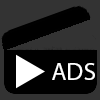
<style>
.page{position:relative;width:100px;height:100px;background:#000000}
.page>*{position:absolute;margin:0}
.t1{font:25px "MyriadPro-Regular";color:#ffffff}
</style>
<div class="page">
<p class="t1" style="left:52px;top:63px;width:43px;height:17px">ADS</p>
</div>
